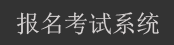
<style>
.page{position:relative;width:174px;height:45px;background:#333333}
.page>*{position:absolute;margin:0}
.t1{font:24px "SimSun";color:#d9d5d5}
</style>
<div class="page">
<p class="t1" style="left:16px;top:12px;width:143px;height:23px">报名考试系统</p>
</div>
